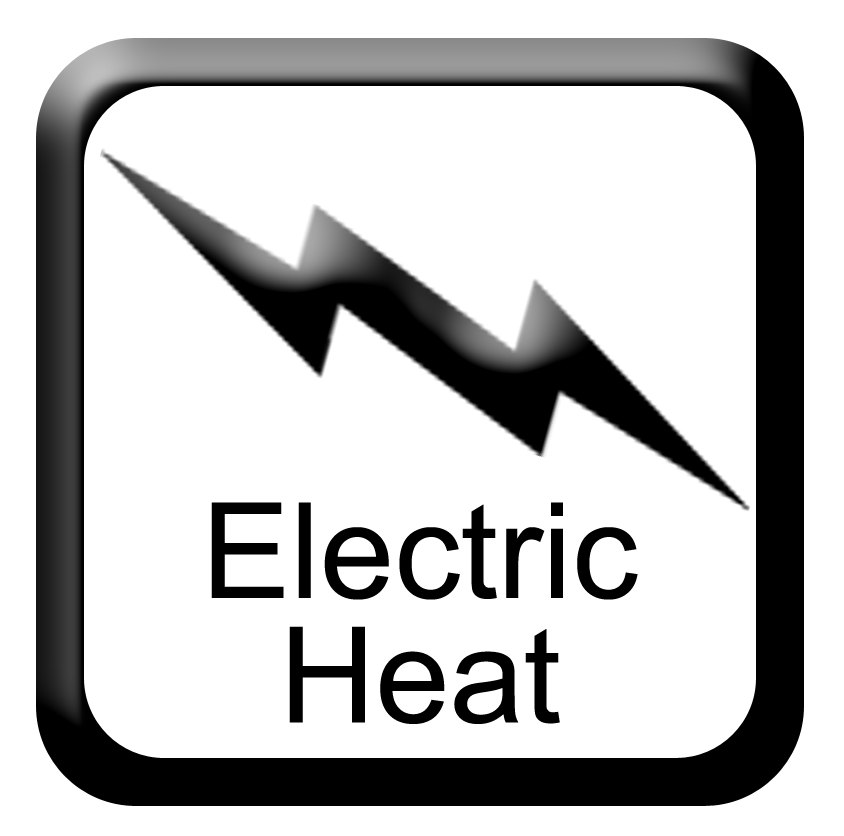
<style>
.page{position:relative;width:844px;height:836px;background:#ffffff}
.page>*{position:absolute;margin:0}
.t1{font:133.3px/124.4px "ArialMT";color:#000000}
</style>
<div class="page">
<p class="t1" style="left:211px;top:502px;width:427px;height:222px;text-align:center">Electric<br>Heat</p>
</div>
